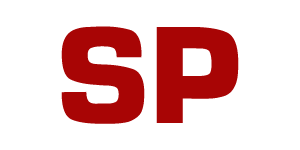
<style>
.page{position:relative;width:300px;height:150px;background:#ffffff}
.page>*{position:absolute;margin:0}
.t1{font:144px "Eurostile-Black";color:#a80505}
</style>
<div class="page">
<p class="t1" style="left:61px;top:26px;width:178px;height:98px">SP</p>
</div>
